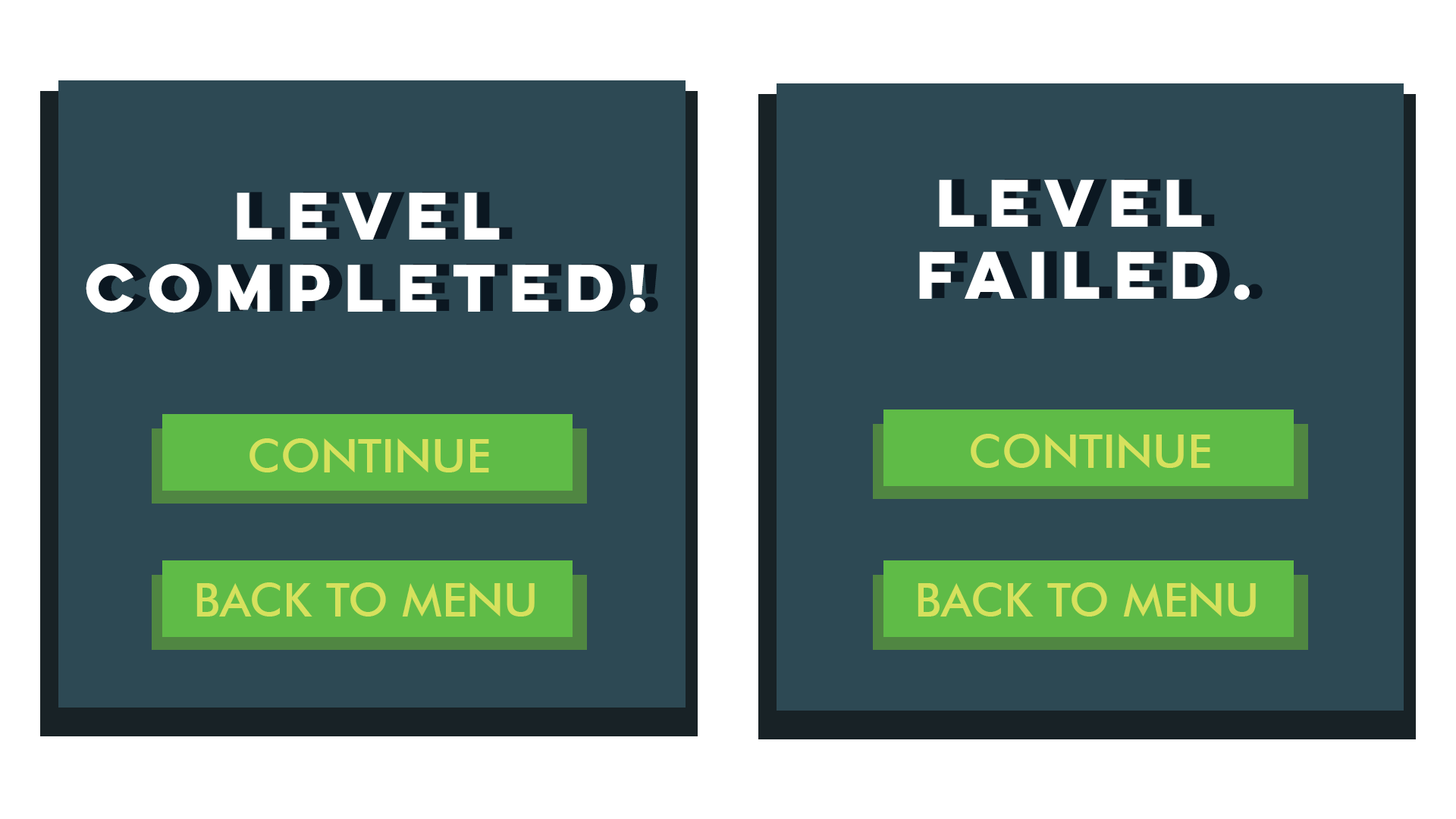
<style>
.page{position:relative;width:1456px;height:819px;background:#2d4954}
.page>*{position:absolute;margin:0}
.t1{font:60.1px "LuloCleanOne-Bold";color:#ffffff}
.t2{font:46.3px "FuturaBT-Medium";color:#d6e15d}
</style>
<div class="page">
<p class="t1" style="left:919px;top:180px;width:331px;height:120px;text-align:center">LEVEL <br>FAILED.</p>
<p class="t1" style="left:86px;top:193px;width:559px;height:120px;text-align:center">LEVEL<br>COMPLETED!</p>
<p class="t2" style="left:971px;top:434px;width:239px;height:34px">CONTINUE</p>
<p class="t2" style="left:249px;top:438px;width:240px;height:34px">CONTINUE</p>
<p class="t2" style="left:196px;top:582px;width:339px;height:35px">BACK TO MENU</p>
<p class="t2" style="left:918px;top:582px;width:338px;height:35px">BACK TO MENU</p>
</div>
